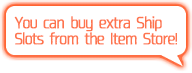
<style>
.page{position:relative;width:192px;height:73px;background:#ffffff}
.page>*{position:absolute;margin:0}
.t1{font:15px/16px "04KanjyukuGothic";letter-spacing:-0.08em;color:#fe754e;font-weight:bold;scale:0.9 1}
</style>
<div class="page">
<p class="t1" style="left:14px;top:16px;width:163px;height:29px">You can buy extra Ship<br>Slots from the Item Store!</p>
</div>
